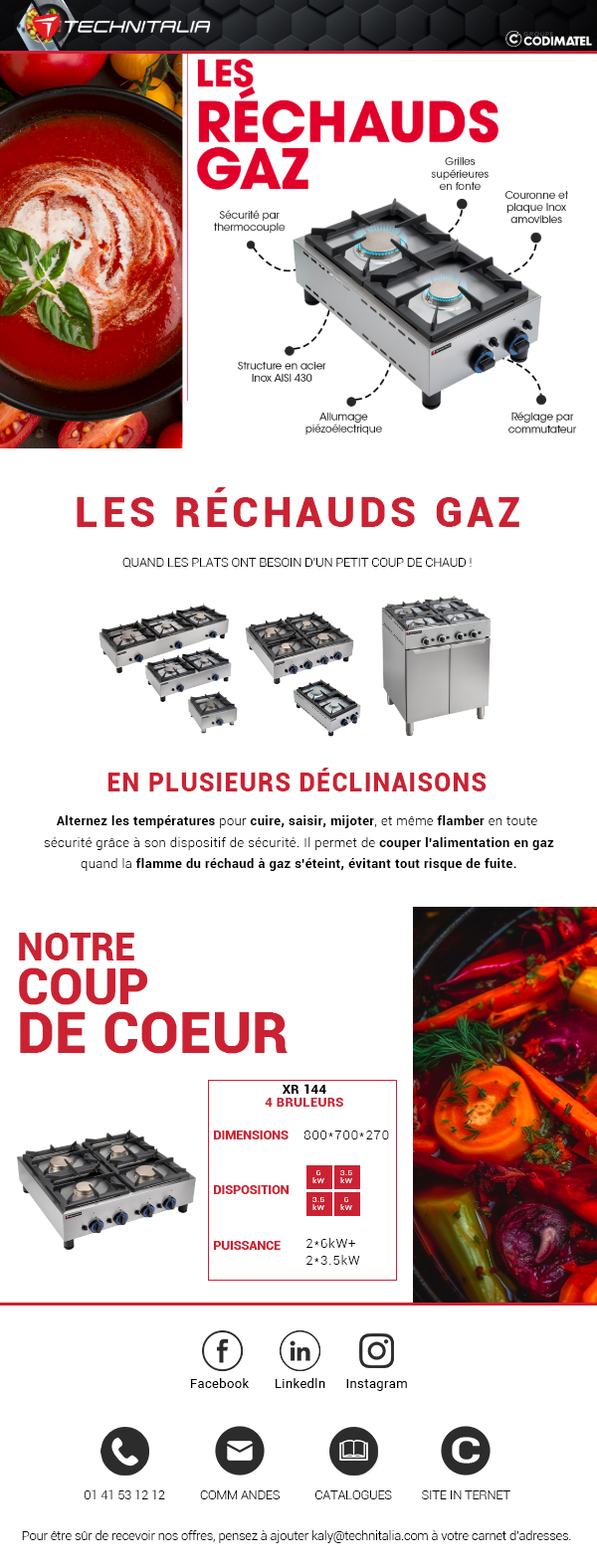
<style>
.page{position:relative;width:597px;height:1568px;background:#ffffff}
.page>*{position:absolute;margin:0}
.t1{font:41.4px "Roboto-Black";letter-spacing:0.1em;color:#cb2233}
.t2{font:12.4px "Roboto-Light";color:#030000}
.t3{font:24.9px "Roboto-Black";letter-spacing:0.05em;color:#cb2233}
.t4{font:12.4px "Roboto-Light";letter-spacing:0.05em;color:#030000}
.t5{font:12.4px "Roboto-Bold";letter-spacing:0.05em;color:#030000}
.t6{font:58px/41.4px "Roboto-Black";color:#cb2233}
.t7{font:37.3px/33.1px "Roboto-Black";color:#cb2233}
.t8{font:49.7px/41.4px "Roboto-Black";color:#cb2233}
.t9{font:12.4px/12.4px "Roboto-Black";letter-spacing:0.05em;color:#cb2233}
.t10{font:12.4px/12.4px "Roboto-Black";letter-spacing:0.05em;color:#000000}
.t11{font:12.4px "Roboto-Light";letter-spacing:0.1em;color:#000000}
.t12{font:12.4px "Roboto-Black";color:#cb2233}
.t13{font:7.5px/7.5px "Roboto-Light";letter-spacing:0.1em;color:#ffffff}
.t14{font:12.4px/16.6px "Roboto-Light";letter-spacing:0.1em;color:#000000}
.t15{font:12.4px "Roboto-Regular";letter-spacing:0.05em;color:#030000}
</style>
<div class="page">
<p class="t1" style="left:77px;top:487px;width:442px;height:40px">LES RÉCHAUDS GAZ</p>
<p class="t2" style="left:122px;top:558px;width:349px;height:10px">QUAND LES PLATS ONT BESOIN D'UN PETIT COUP DE CHAUD !</p>
<p class="t3" style="left:107px;top:768px;width:379px;height:23px">EN PLUSIEURS DÉCLINAISONS</p>
<p class="t4" style="left:44px;top:815px;width:510px;height:56px;text-align:center"><span class="t5">Alternez les températures</span> pour <span class="t5">cuire, saisir, mijoter</span>, et même <span class="t5">flamber</span> en toute<br> sécurité grâce à son dispositif de sécurité. Il permet de <span class="t5">couper l'alimentation en gaz<br></span> quand la <span class="t5">flamme du réchaud à gaz s'éteint, évitant tout risque de fuite.</span></p>
<p class="t6" style="left:19px;top:933px;width:268px;height:121px"><span class="t7">NOTRE<br></span><span class="t8">COUP<br></span>DE COEUR</p>
<p class="t9" style="left:264px;top:1084px;width:79px;height:23px;text-align:center"><span class="t10">XR 144<br></span>4 BRULEURS</p>
<p class="t11" style="left:213px;top:1131px;width:176px;height:8px"><span class="t12">DIMENSIONS     </span>800*700*270</p>
<p class="t13" style="left:312px;top:1170px;width:12px;height:13px;text-align:center">6<br>kW</p>
<p class="t13" style="left:340px;top:1170px;width:12px;height:13px;text-align:center">3.5<br>kW</p>
<p class="t12" style="left:213px;top:1185px;width:76px;height:9px">DISPOSITION</p>
<p class="t13" style="left:312px;top:1197px;width:12px;height:13px;text-align:center">3.5<br>kW</p>
<p class="t13" style="left:340px;top:1197px;width:12px;height:13px;text-align:center">6<br>kW</p>
<p class="t12" style="left:213px;top:1241px;width:67px;height:9px">PUISSANCE</p>
<p class="t14" style="left:306px;top:1238px;width:54px;height:27px">2*6kW+<br>2*3.5kW</p>
<p class="t15" style="left:191px;top:1378px;width:59px;height:10px">Facebook</p>
<p class="t15" style="left:275px;top:1378px;width:50px;height:10px">Linkedln</p>
<p class="t15" style="left:346px;top:1379px;width:61px;height:12px">Instagram</p>
<p class="t2" style="left:84px;top:1489px;width:81px;height:10px">01 41 53 12 12</p>
<p class="t2" style="left:200px;top:1490px;width:79px;height:9px">COMM ANDES</p>
<p class="t2" style="left:315px;top:1490px;width:77px;height:9px">CATALOGUES</p>
<p class="t2" style="left:422px;top:1490px;width:88px;height:9px">SITE IN TERNET</p>
<p class="t2" style="left:22px;top:1530px;width:549px;height:13px">Pour être sûr de recevoir nos offres, pensez à ajouter kaly@technitalia.com à votre carnet d'adresses.</p>
</div>
